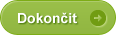
<style>
.page{position:relative;width:116px;height:35px}
.page>*{position:absolute;margin:0}
.t1{font:14px "Arial-BoldMT";color:#ffffff}
</style>
<div class="page">
<p class="t1" style="left:18px;top:12px;width:59px;height:12px">Dokončit</p>
</div>
